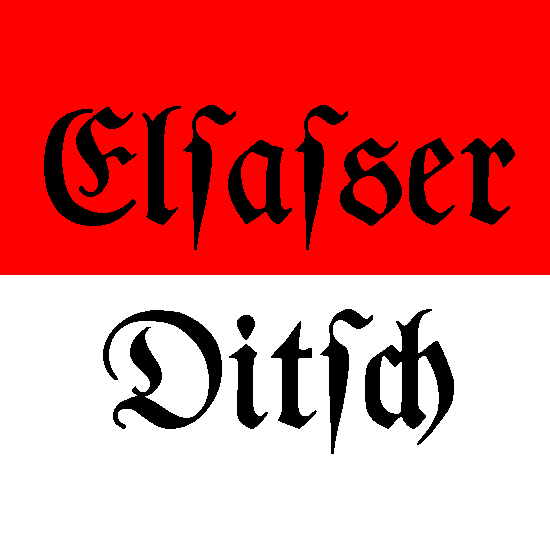
<style>
.page{position:relative;width:550px;height:550px;background:#ffffff}
.page>*{position:absolute;margin:0}
.t1{font:150px "TypographerFraktur-Medium";color:#000000}
</style>
<div class="page">
<p class="t1" style="left:44px;top:105px;width:471px;height:349px;text-align:center">Elſaſser<br><br>Ditſ&lt;</p>
</div>
